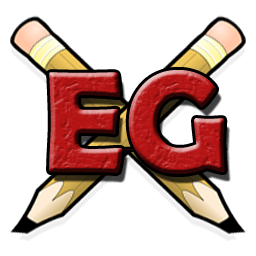
<style>
.page{position:relative;width:256px;height:256px;background:#ffffff}
.page>*{position:absolute;margin:0}
.t1{font:145px "BerlinSansFBDemi-Bold"}
</style>
<div class="page">
<p class="t1" style="left:49px;top:70px;width:176px;height:104px">EG</p>
</div>
